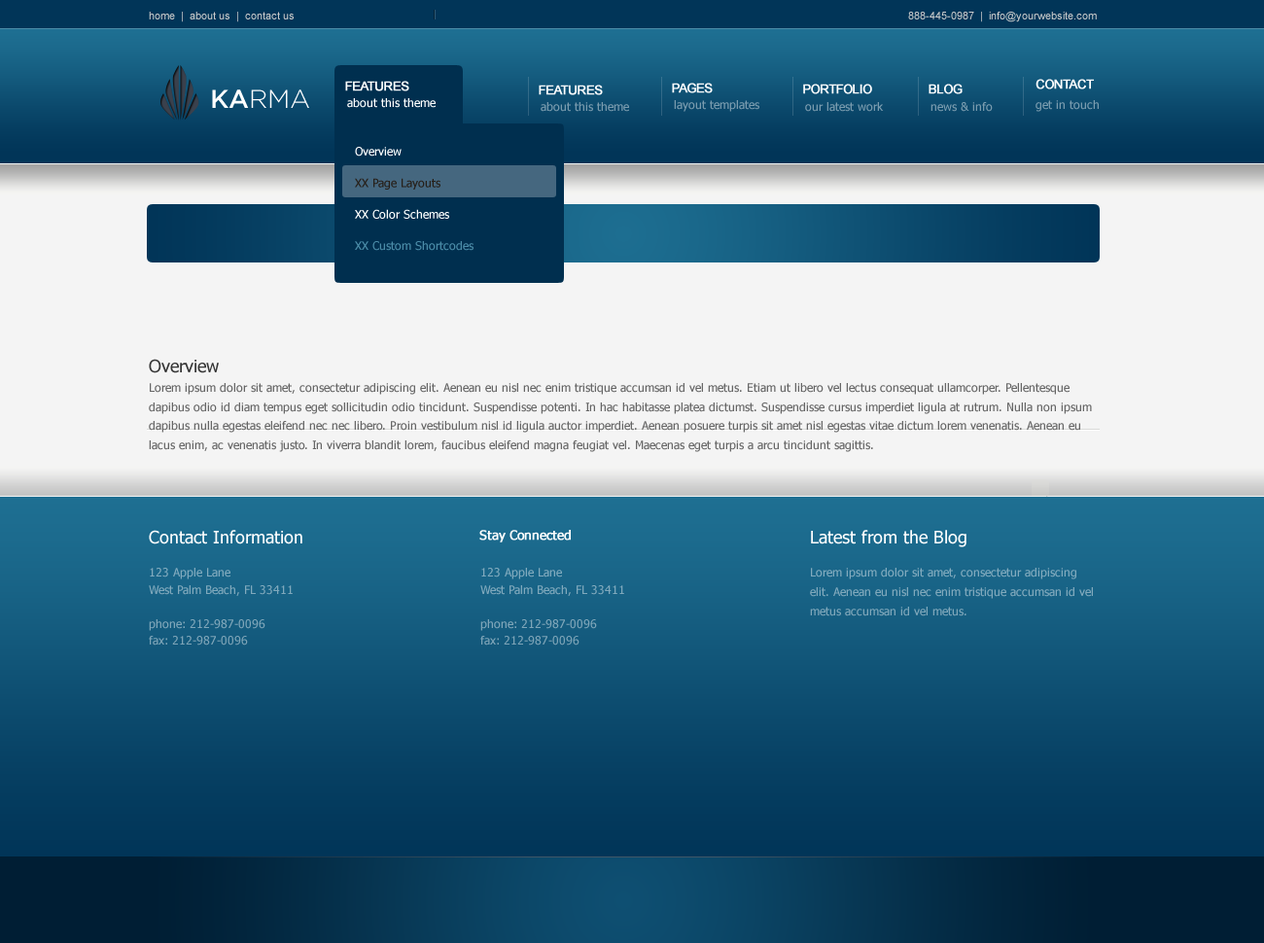
<style>
.page{position:relative;width:1264px;height:943px;background:#f4f4f4}
.page>*{position:absolute;margin:0}
.t1{font:10.7px "ArialMT";color:#cccccc}
.t2{font:25.6px "Gotham-Light";color:#ffffff}
.t3{font:25.6px "Gotham-Medium";color:#ffffff}
.t4{font:12.6px "ArialMT";letter-spacing:-0.05em;color:#ffffff;font-weight:bold}
.t5{font:11.7px "Tahoma";color:#ffffff}
.t6{font:11.7px "Tahoma";color:#7a9caf}
.t7{font:11.7px "Tahoma";color:#799bae}
.t8{font:11.7px/31.5px "Tahoma";color:#ffffff}
.t9{font:11.7px/31.5px "Tahoma";color:#261f19}
.t10{font:11.7px "Tahoma";color:#4b8ca8}
.t11{font:11.7px/19.4px "Tahoma";color:#666666}
.t12{font:17.5px/29.1px "Tahoma";color:#363636}
.t13{font:17.5px "Tahoma";color:#ffffff}
.t14{font:12.6px "Tahoma";color:#ffffff;font-weight:bold}
.t15{font:11.7px/17px "Tahoma";color:#80a9bc}
.t16{font:11.7px/19.4px "Tahoma";color:#80a9bd}
</style>
<div class="page">
<p class="t1" style="left:149px;top:12px;width:145px;height:10px">home  |  about us  |  contact us</p>
<p class="t1" style="left:908px;top:12px;width:189px;height:10px">888-445-0987  |  info@yourwebsite.com</p>
<p class="t2" style="left:212px;top:89px;width:97px;height:19px"><span class="t3">KA</span>RMA</p>
<p class="t4" style="left:345px;top:81px;width:64px;height:10px">FEATURES</p>
<p class="t4" style="left:539px;top:85px;width:64px;height:10px">FEATURES</p>
<p class="t4" style="left:672px;top:83px;width:41px;height:10px">PAGES</p>
<p class="t4" style="left:803px;top:84px;width:69px;height:10px">PORTFOLIO</p>
<p class="t4" style="left:929px;top:84px;width:34px;height:10px">BLOG</p>
<p class="t4" style="left:1036px;top:79px;width:58px;height:10px">CONTACT</p>
<p class="t5" style="left:347px;top:98px;width:89px;height:10px">about this theme</p>
<p class="t6" style="left:674px;top:100px;width:85px;height:12px">layout templates</p>
<p class="t6" style="left:1036px;top:100px;width:63px;height:12px">get in touch</p>
<p class="t7" style="left:541px;top:102px;width:88px;height:10px">about this theme</p>
<p class="t7" style="left:805px;top:102px;width:79px;height:10px">our latest work</p>
<p class="t7" style="left:931px;top:102px;width:62px;height:10px">news &amp; info</p>
<p class="t8" style="left:355px;top:147px;width:94px;height:72px">Overview<br><span class="t9">XX Page Layouts<br></span>XX Color Schemes</p>
<p class="t10" style="left:355px;top:241px;width:119px;height:10px">XX Custom Shortcodes</p>
<p class="t11" style="left:149px;top:359px;width:943px;height:93px"><span class="t12">Overview</span><br>Lorem ipsum dolor sit amet, consectetur adipiscing elit. Aenean eu nisl nec enim tristique accumsan id vel metus. Etiam ut libero vel lectus consequat ullamcorper. Pellentesque dapibus odio id diam tempus eget sollicitudin odio tincidunt. Suspendisse potenti. In hac habitasse platea dictumst. Suspendisse cursus imperdiet ligula at rutrum. Nulla non ipsum dapibus nulla egestas eleifend nec nec libero. Proin vestibulum nisl id ligula auctor imperdiet. Aenean posuere turpis sit amet nisl egestas vitae dictum lorem venenatis. Aenean eu lacus enim, ac venenatis justo. In viverra blandit lorem, faucibus eleifend magna feugiat vel. Maecenas eget turpis a arcu tincidunt sagittis.</p>
<p class="t13" style="left:149px;top:530px;width:153px;height:15px">Contact Information</p>
<p class="t14" style="left:479px;top:530px;width:92px;height:13px">Stay Connected</p>
<p class="t13" style="left:811px;top:530px;width:156px;height:17px">Latest from the Blog</p>
<p class="t15" style="left:149px;top:568px;width:144px;height:78px">123 Apple Lane<br>West Palm Beach, FL 33411<br><br>phone: 212-987-0096<br>fax: 212-987-0096</p>
<p class="t15" style="left:480px;top:568px;width:144px;height:78px">123 Apple Lane<br>West Palm Beach, FL 33411<br><br>phone: 212-987-0096<br>fax: 212-987-0096</p>
<p class="t16" style="left:810px;top:568px;width:283px;height:49px">Lorem ipsum dolor sit amet, consectetur adipiscing elit. Aenean eu nisl nec enim tristique accumsan id vel metus accumsan id vel metus.</p>
</div>
